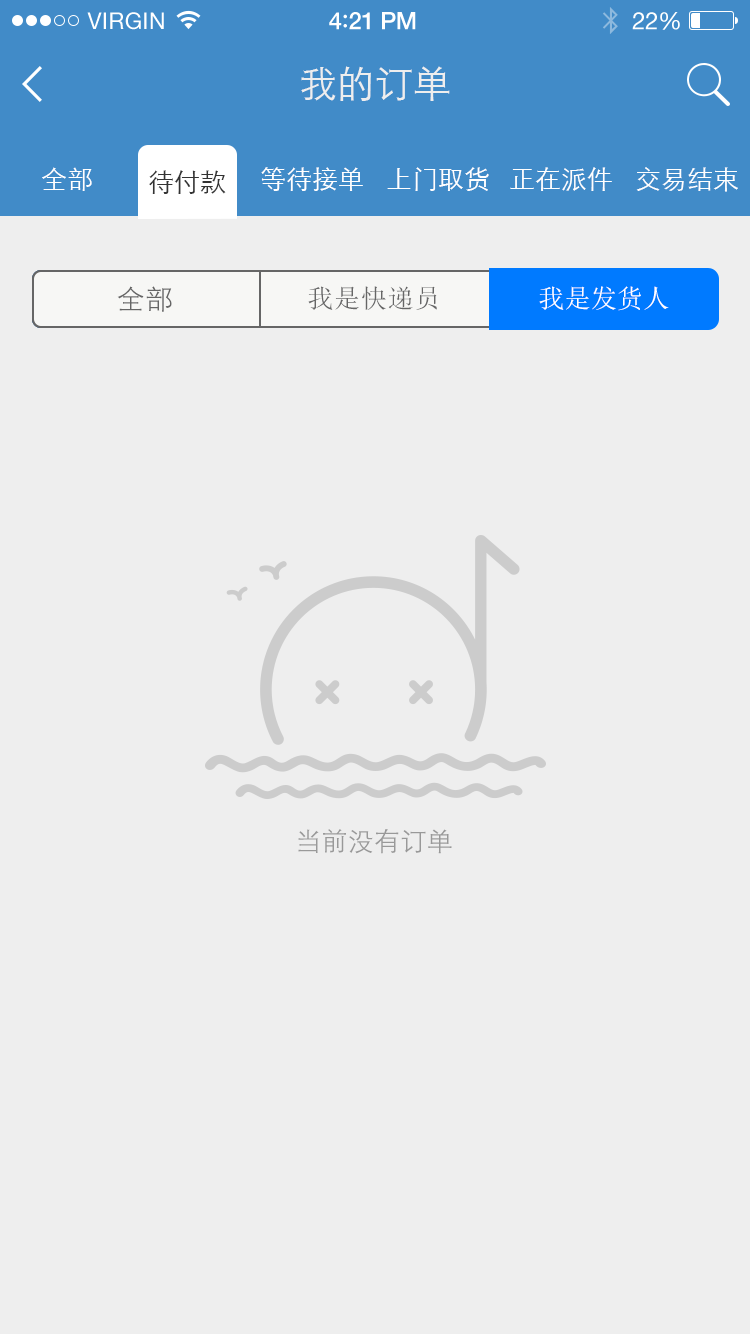
<style>
.page{position:relative;width:750px;height:1334px;background:#eeeeee}
.page>*{position:absolute;margin:0}
.t1{font:23px "HelveticaNeue";letter-spacing:0.02em;color:#ffffff}
.t2{font:24px "HelveticaNeue-Medium";letter-spacing:-0.02em;color:#ffffff}
.t3{font:26px "Avenir-Medium";letter-spacing:-0.02em;color:#ffffff}
.t4{font:24px "HelveticaNeue";letter-spacing:-0.02em;color:#ffffff}
.t5{font:38px "STXihei";color:#eeeeee}
.t6{font:26px "STXihei";color:#ffffff}
.t7{font:26px "STXihei";color:#333333}
.t8{font:28px "STXihei";letter-spacing:0.02em;color:#666666}
.t9{font:26px "SimSun";letter-spacing:0.03em;color:#666666}
.t10{font:26px "SimSun";letter-spacing:0.01em;color:#ffffff}
.t11{font:26px "STXihei";letter-spacing:0.01em;color:#999999}
</style>
<div class="page">
<p class="t1" style="left:87px;top:12px;width:77px;height:18px">VIRGIN</p>
<p class="t2" style="left:329px;top:12px;width:87px;height:18px">4<span class="t3">:</span>21 PM</p>
<p class="t4" style="left:632px;top:12px;width:48px;height:18px">22%</p>
<p class="t5" style="left:301px;top:66px;width:149px;height:35px">我的订单</p>
<p class="t6" style="left:42px;top:167px;width:50px;height:24px">全部</p>
<p class="t7" style="left:149px;top:170px;width:77px;height:24px">待付款</p>
<p class="t6" style="left:261px;top:167px;width:102px;height:24px">等待接单</p>
<p class="t6" style="left:387px;top:167px;width:102px;height:24px">上门取货</p>
<p class="t6" style="left:510px;top:167px;width:102px;height:24px">正在派件</p>
<p class="t6" style="left:636px;top:167px;width:102px;height:25px">交易结束</p>
<p class="t8" style="left:117px;top:286px;width:55px;height:26px">全部</p>
<p class="t8" style="left:117px;top:286px;width:55px;height:26px">全部</p>
<p class="t8" style="left:117px;top:286px;width:55px;height:26px">全部</p>
<p class="t9" style="left:308px;top:286px;width:129px;height:24px">我是快递员</p>
<p class="t9" style="left:308px;top:286px;width:129px;height:24px">我是快递员</p>
<p class="t9" style="left:308px;top:286px;width:129px;height:24px">我是快递员</p>
<p class="t10" style="left:539px;top:286px;width:130px;height:25px">我是发货人</p>
<p class="t10" style="left:539px;top:286px;width:130px;height:25px">我是发货人</p>
<p class="t10" style="left:539px;top:286px;width:130px;height:25px">我是发货人</p>
<p class="t11" style="left:298px;top:829px;width:154px;height:25px">当前没有订单</p>
</div>
